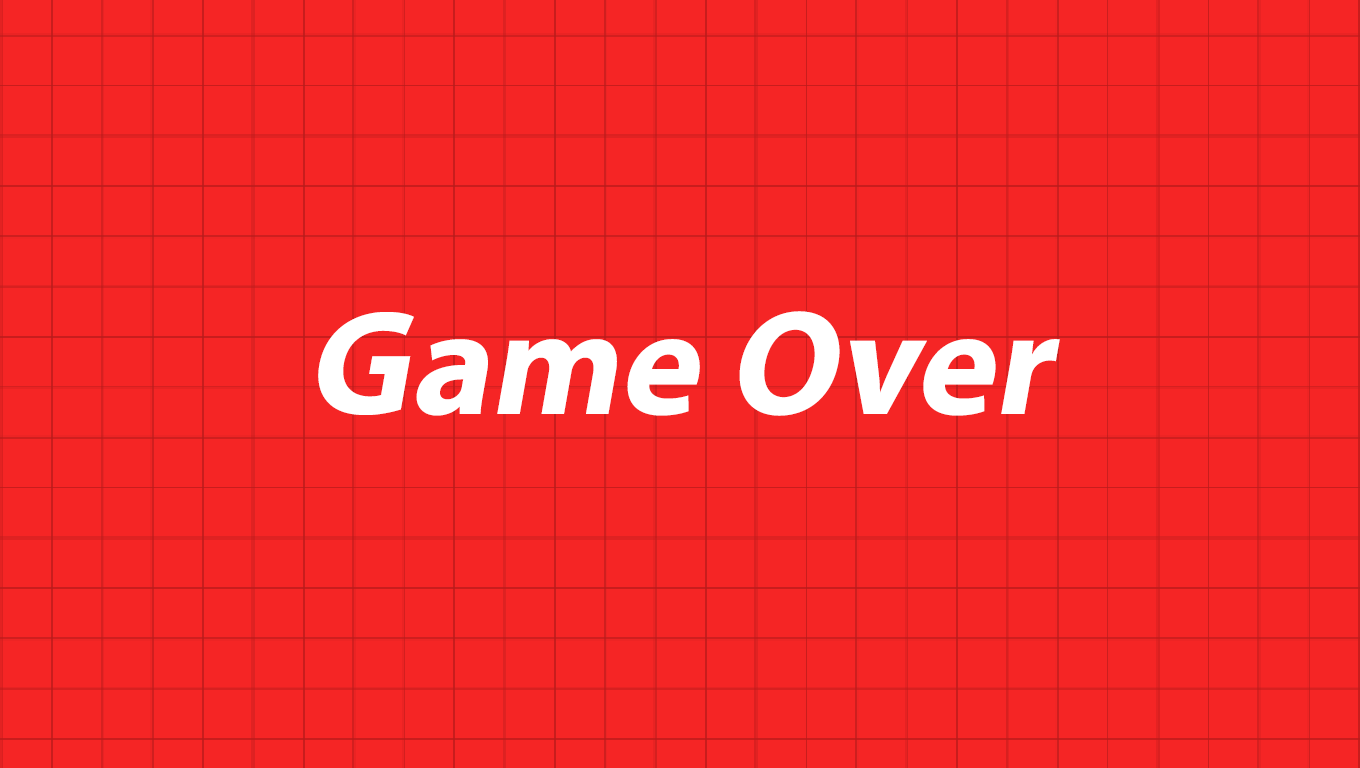
<style>
.page{position:relative;width:1360px;height:768px;background:#f52525}
.page>*{position:absolute;margin:0}
.t1{font:150px "MyriadPro-Bold";color:#ffffff;font-style:italic}
</style>
<div class="page">
<p class="t1" style="left:318px;top:311px;width:742px;height:105px">Game Over</p>
</div>
